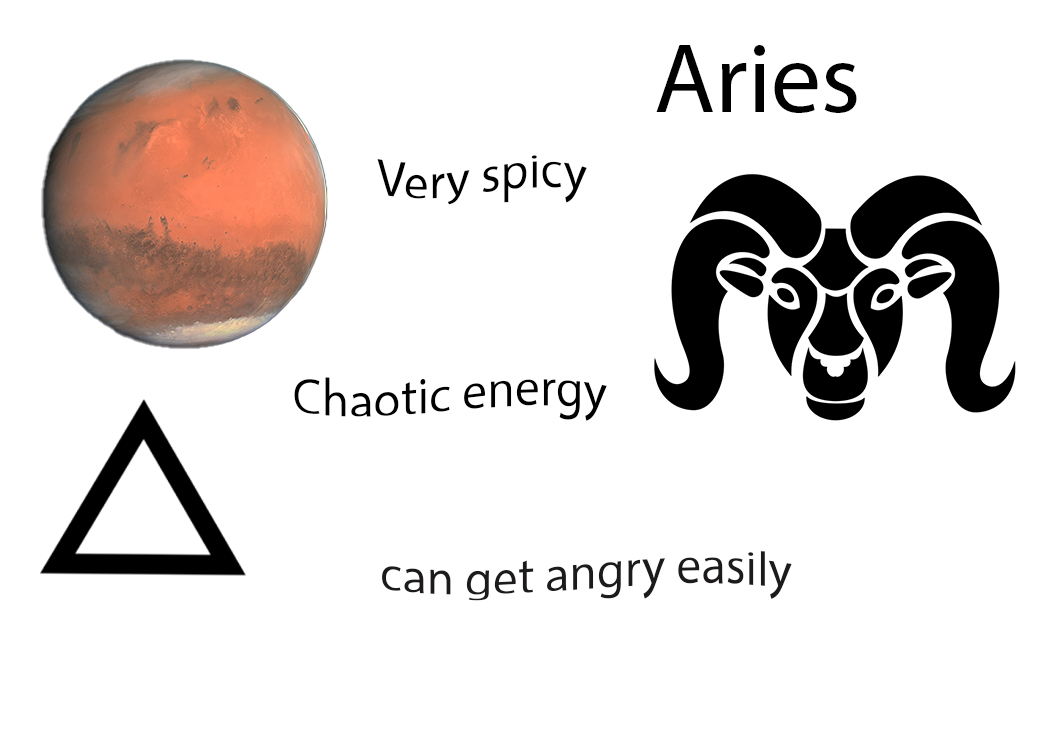
<style>
.page{position:relative;width:1050px;height:750px;background:#ffffff}
.page>*{position:absolute;margin:0}
.t1{font:100px "MyriadPro-Regular";color:#000000}
.t2{font:50px "MyriadPro-Regular";color:#000000}
.t3{font:50px "MyriadPro-Regular";color:#1c1a1a}
</style>
<div class="page">
<p class="t1" style="left:656px;top:45px;width:201px;height:68px">Aries</p>
<p class="t2" style="left:377px;top:155px;width:210px;height:50px">Very spicy</p>
<p class="t2" style="left:294px;top:377px;width:313px;height:44px">Chaotic energy</p>
<p class="t3" style="left:382px;top:551px;width:410px;height:50px">can get angry easily</p>
</div>
